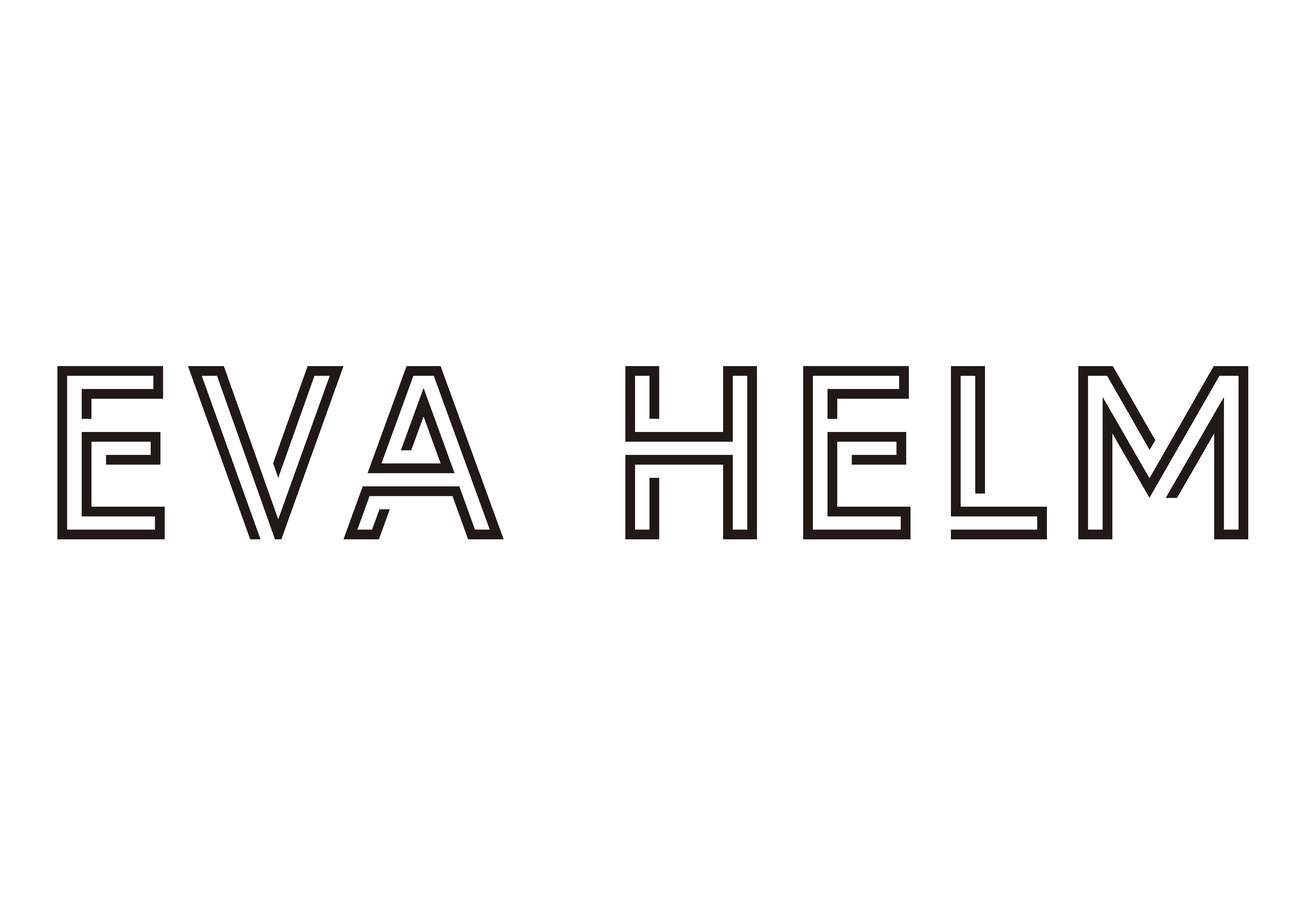
<style>
.page{position:relative;width:1299px;height:918px;background:#ffffff}
.page>*{position:absolute;margin:0}
.t1{font:231.4px "LIBRARY3AM";color:#211915}
</style>
<div class="page">
<p class="t1" style="left:57px;top:366px;width:1191px;height:174px">Eva Helm</p>
</div>
